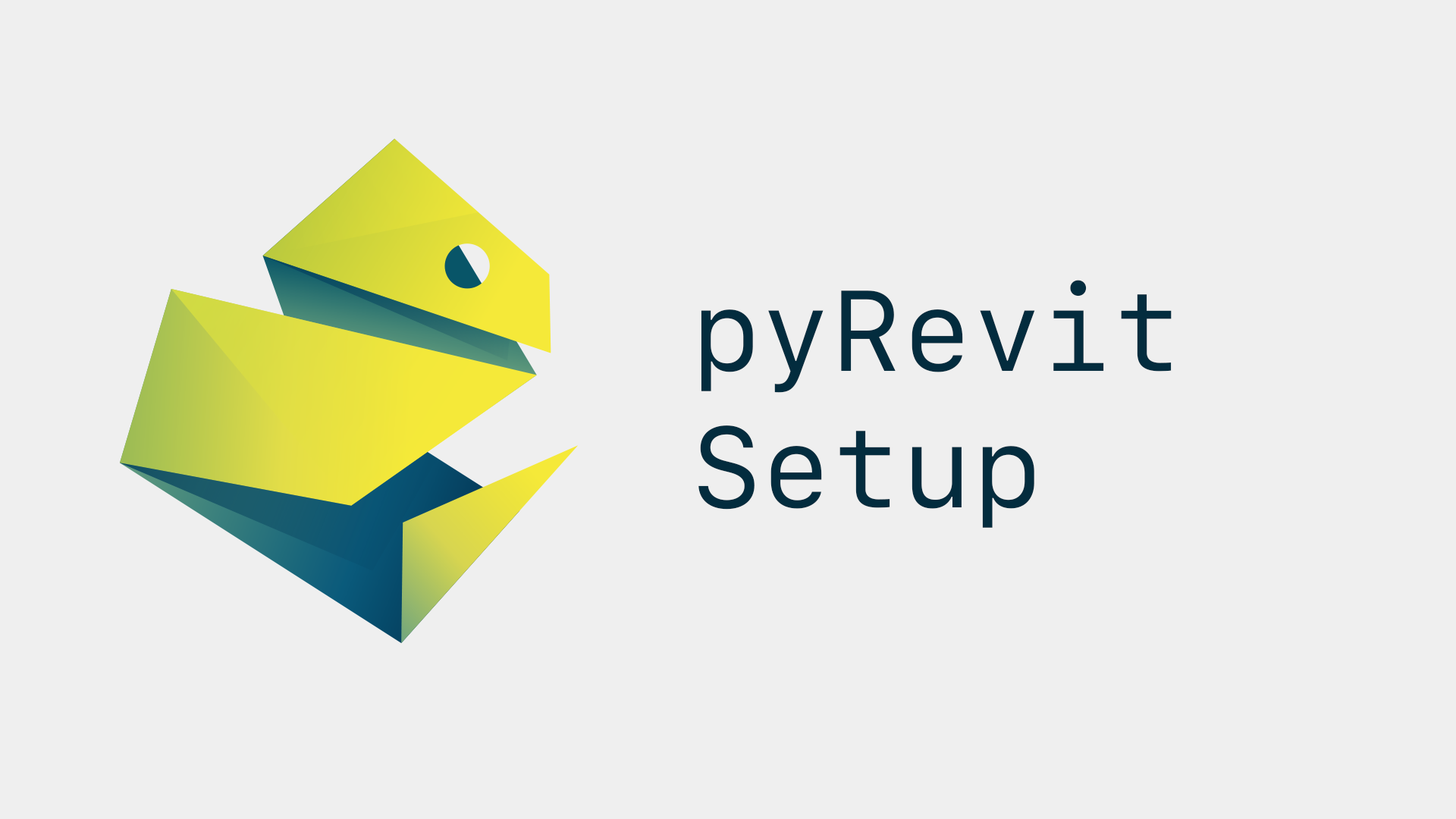
<style>
.page{position:relative;width:1456px;height:819px;background:#efefef}
.page>*{position:absolute;margin:0}
.t1{font:113.7px "SFMono-Regular";color:#032c3e}
</style>
<div class="page">
<p class="t1" style="left:698px;top:280px;width:474px;height:248px">pyRevit<br>Setup</p>
</div>
